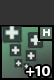
<style>
.page{position:relative;width:54px;height:80px;background:#333333}
.page>*{position:absolute;margin:0}
.t1{font:10.4px "MyriadPro-Bold";letter-spacing:-0.05em;color:#ffffff}
.t2{font:15.4px "MyriadPro-Bold";letter-spacing:-0.05em;color:#ffffff}
</style>
<div class="page">
<p class="t1" style="left:43px;top:29px;width:7px;height:7px">H</p>
<p class="t2" style="left:26px;top:66px;width:24px;height:10px">+10</p>
</div>
